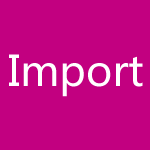
<style>
.page{position:relative;width:150px;height:150px;background:#c20080}
.page>*{position:absolute;margin:0}
.t1{font:41.7px "MicrosoftYaHei";color:#ffffff}
</style>
<div class="page">
<p class="t1" style="left:9px;top:54px;width:134px;height:43px">Import</p>
</div>
